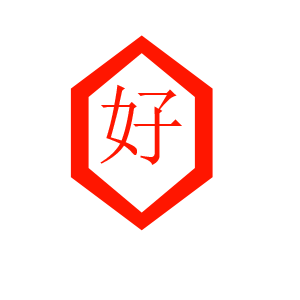
<style>
.page{position:relative;width:300px;height:300px;background:#ffffff}
.page>*{position:absolute;margin:0}
.t1{font:88.2px "SimSun";color:#ff1600}
</style>
<div class="page">
<p class="t1" style="left:100px;top:84px;width:82px;height:81px">好</p>
</div>
